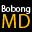
<style>
.page{position:relative;width:32px;height:32px;background:#000000}
.page>*{position:absolute;margin:0}
.t1{font:9px "MyriadPro-Regular";color:#ffffff}
.t2{font:20px "MyriadPro-Regular";color:#ffc000}
</style>
<div class="page">
<p class="t1" style="left:1px;top:5px;width:30px;height:9px">Bobong</p>
<p class="t2" style="left:2px;top:14px;width:28px;height:14px">MD</p>
</div>
